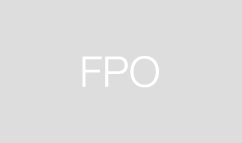
<style>
.page{position:relative;width:242px;height:143px;background:#dddddd}
.page>*{position:absolute;margin:0}
.t1{font:42px "HelveticaNeue-Light";letter-spacing:0.005em;color:#ffffff}
</style>
<div class="page">
<p class="t1" style="left:82px;top:56px;width:77px;height:32px">FPO</p>
</div>
